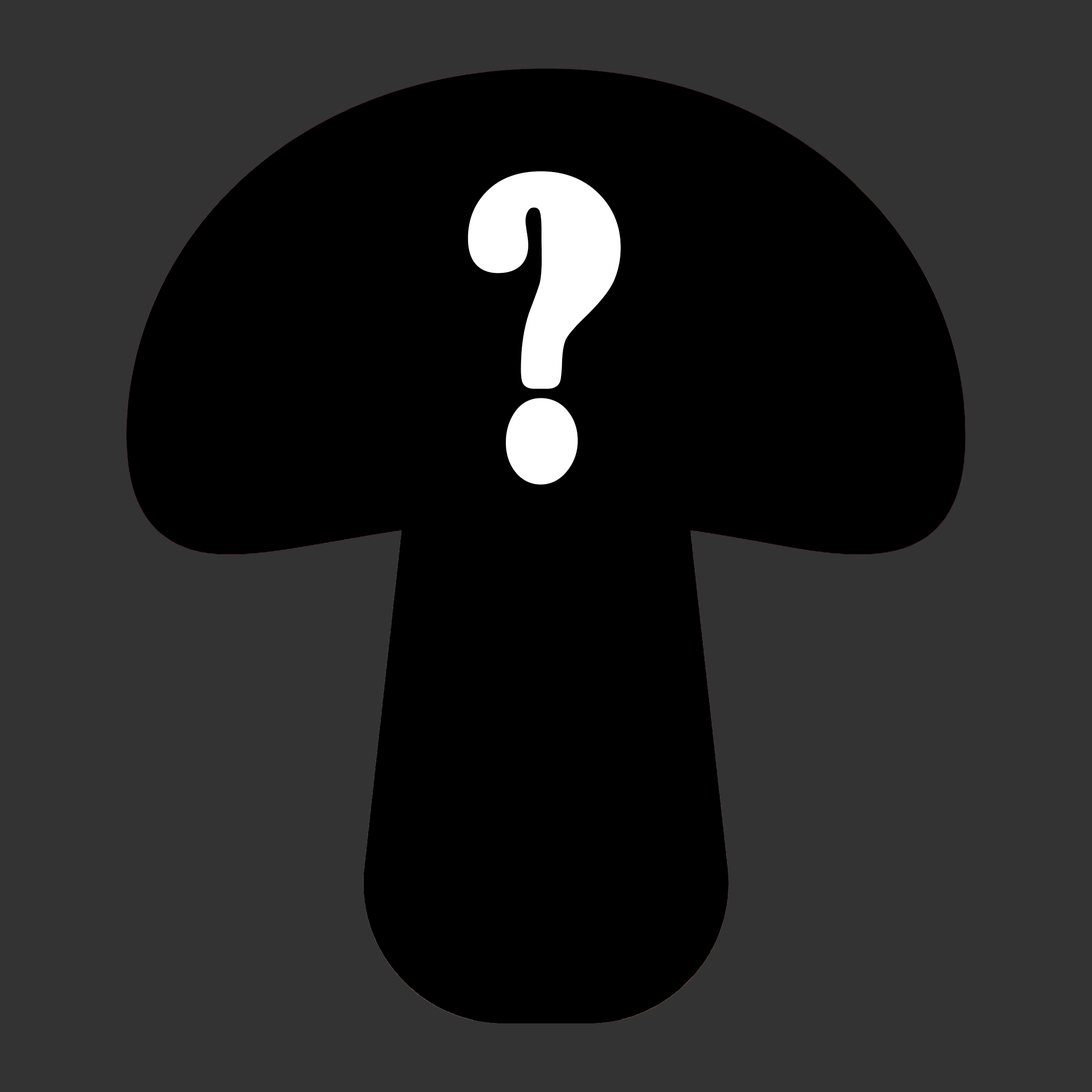
<style>
.page{position:relative;width:1092px;height:1092px;background:#333333}
.page>*{position:absolute;margin:0}
.t1{font:373px "BernardMT-Condensed";color:#ffffff;font-weight:bold}
</style>
<div class="page">
<p class="t1" style="left:468px;top:171px;width:153px;height:314px">?</p>
</div>
